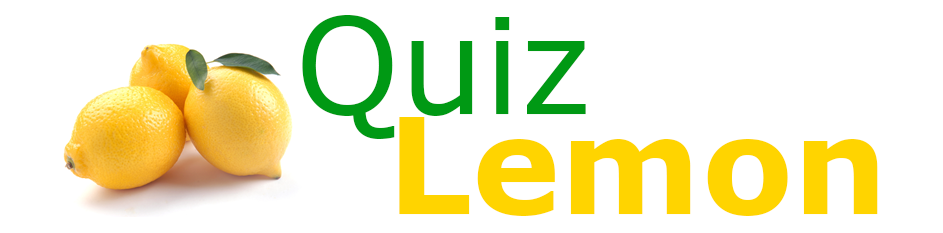
<style>
.page{position:relative;width:943px;height:233px;background:#ffffff}
.page>*{position:absolute;margin:0}
.t1{font:133.3px "Verdana";color:#009914}
.t2{font:133.3px "Verdana-Bold";color:#ffd400}
</style>
<div class="page">
<p class="t1" style="left:302px;top:15px;width:284px;height:124px">Quiz</p>
<p class="t2" style="left:399px;top:117px;width:479px;height:99px">Lemon</p>
</div>
